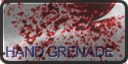
<style>
.page{position:relative;width:128px;height:64px}
.page>*{position:absolute;margin:0}
.t1{font:15px "Arial-BoldMT";letter-spacing:-0.08em}
</style>
<div class="page">
<p class="t1" style="left:6px;top:46px;width:108px;height:12px">HAND GRENADE</p>
</div>
